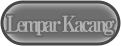
<style>
.page{position:relative;width:121px;height:46px}
.page>*{position:absolute;margin:0}
.t1{font:22px "RyuminPro-ExBold";letter-spacing:-0.16em;color:#b1b1b1;scale:0.85 1}
</style>
<div class="page">
<p class="t1" style="left:7px;top:15px;width:108px;height:21px">Lempar Kacang</p>
</div>
